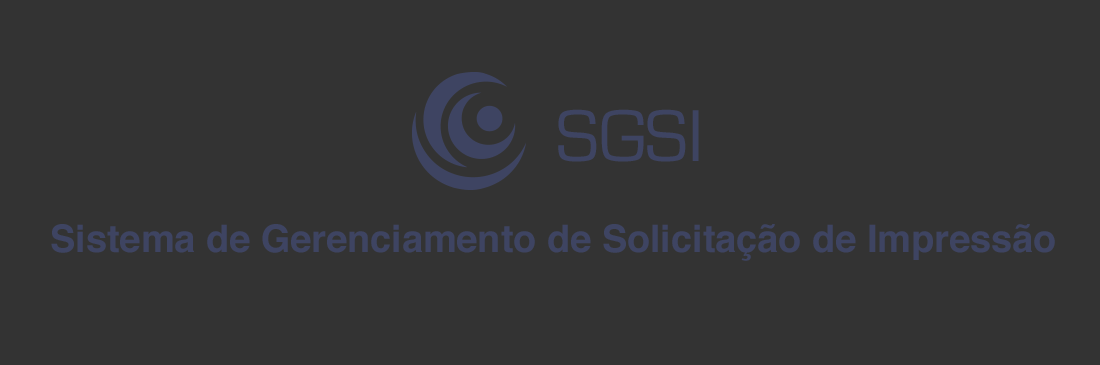
<style>
.page{position:relative;width:1100px;height:365px;background:#333333}
.page>*{position:absolute;margin:0}
.t1{font:76.1px "EurostileRegular";color:#3e4462}
.t2{font:37.8px "Helvetica-Bold";color:#3e4462}
</style>
<div class="page">
<p class="t1" style="left:558px;top:109px;width:141px;height:53px">SGSI</p>
<p class="t2" style="left:51px;top:224px;width:1004px;height:37px">Sistema de Gerenciamento de Solicitação de Impressão</p>
</div>
